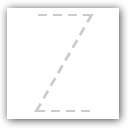
<style>
.page{position:relative;width:128px;height:128px;background:#ffffff}
.page>*{position:absolute;margin:0}
.t1{font:168px "PrintDashed";color:#cccccc;text-transform:uppercase}
</style>
<div class="page">
<p class="t1" style="left:34px;top:14px;width:60px;height:98px">Z</p>
</div>
